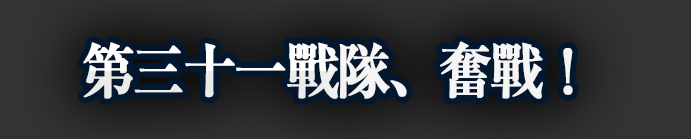
<style>
.page{position:relative;width:691px;height:139px}
.page>*{position:absolute;margin:0}
.t1{font:60px "RyuminPro-Bold";letter-spacing:-0.08em;color:#ffffff;font-weight:bold;scale:0.9 1}
</style>
<div class="page">
<p class="t1" style="left:83px;top:41px;width:490px;height:58px">第三十一戰隊、奮戰！</p>
</div>
